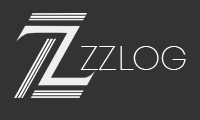
<style>
.page{position:relative;width:200px;height:120px;background:#333333}
.page>*{position:absolute;margin:0}
.t1{font:34px "Mont-ExtraLightDEMO";color:#ffffff;font-variant:small-caps}
</style>
<div class="page">
<p class="t1" style="left:80px;top:46px;width:106px;height:24px">ZZLOG</p>
</div>
